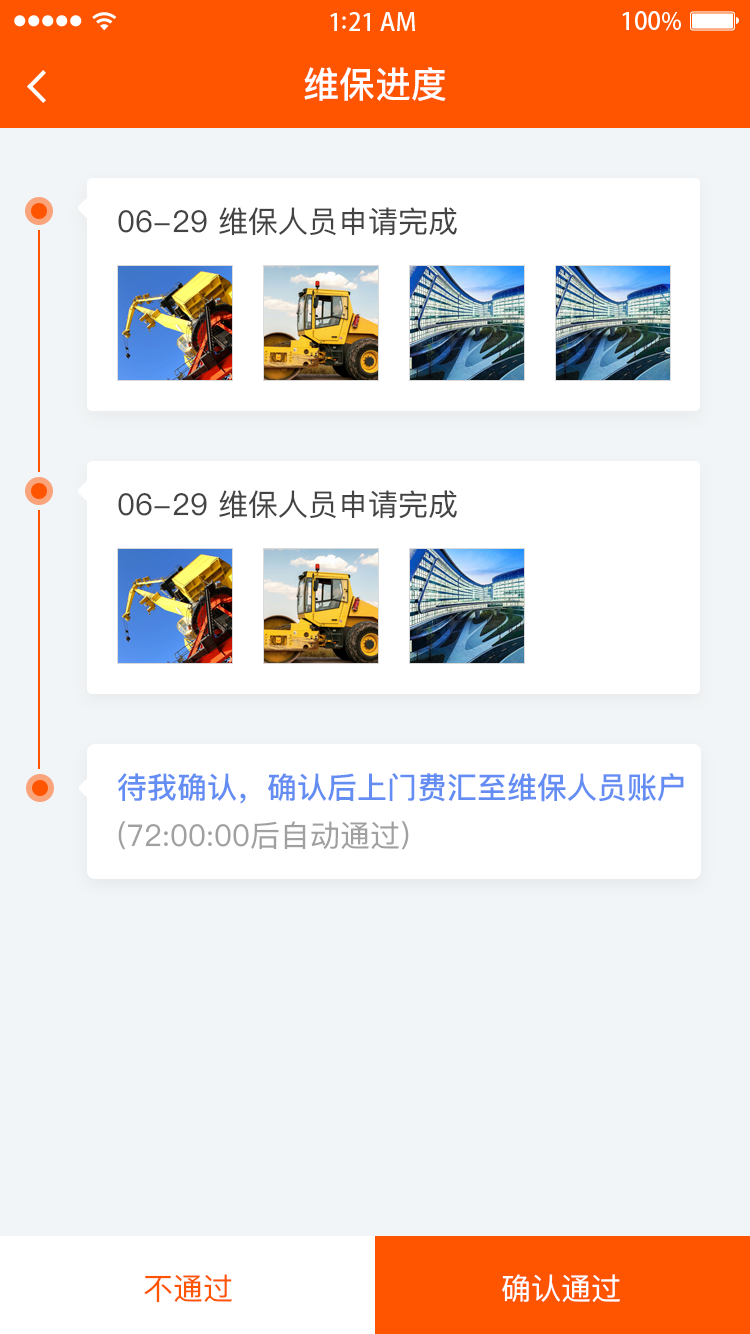
<style>
.page{position:relative;width:750px;height:1334px;background:#f2f5f7}
.page>*{position:absolute;margin:0}
.t1{font:36px "PingFangSC-Medium";color:#ffffff}
.t2{font:30px "PingFangSC-Regular";color:#434343}
.t3{font:30px "PingFangSC-Medium";color:#648df4}
.t4{font:30px "PingFangSC-Regular";color:#a0a0a0}
.t5{font:30px "PingFangSC-Regular";color:#ff5400}
.t6{font:30px "PingFangSC-Regular";color:#ffffff}
</style>
<div class="page">
<p class="t1" style="left:304px;top:67px;width:142px;height:34px">维保进度</p>
<p class="t2" style="left:118px;top:207px;width:339px;height:29px">06-29 维保人员申请完成</p>
<p class="t2" style="left:118px;top:490px;width:339px;height:29px">06-29 维保人员申请完成</p>
<p class="t3" style="left:118px;top:773px;width:566px;height:31px">待我确认，确认后上门费汇至维保人员账户</p>
<p class="t4" style="left:118px;top:821px;width:291px;height:29px">(72:00:00后自动通过)</p>
<p class="t5" style="left:144px;top:1274px;width:88px;height:29px">不通过</p>
<p class="t6" style="left:502px;top:1274px;width:118px;height:28px">确认通过</p>
</div>
